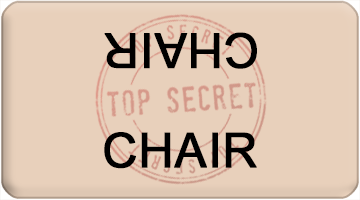
<style>
.page{position:relative;width:360px;height:200px;background:#e8d0bb}
.page>*{position:absolute;margin:0}
.t1{font:48px "ArialMT";color:#000000;font-weight:bold}
</style>
<div class="page">
<p class="t1" style="left:104px;top:32px;width:153px;height:37px;rotate:180deg">CHAIR</p>
<p class="t1" style="left:104px;top:132px;width:153px;height:37px">CHAIR</p>
</div>
